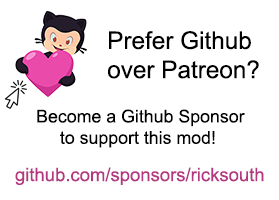
<style>
.page{position:relative;width:279px;height:200px;background:#ffffff}
.page>*{position:absolute;margin:0}
.t1{font:24.3px "ArialMT";color:#000000}
.t2{font:17.8px "ArialMT";color:#000000}
.t3{font:18.5px "ArialMT";color:#b53681}
</style>
<div class="page">
<p class="t1" style="left:108px;top:31px;width:151px;height:48px">Prefer Github<br>over Patreon?</p>
<p class="t2" style="left:37px;top:109px;width:208px;height:39px;text-align:center">Become a Github Sponsor<br>to support this mod!</p>
<p class="t3" style="left:15px;top:167px;width:249px;height:18px">github.com/sponsors/ricksouth</p>
</div>
